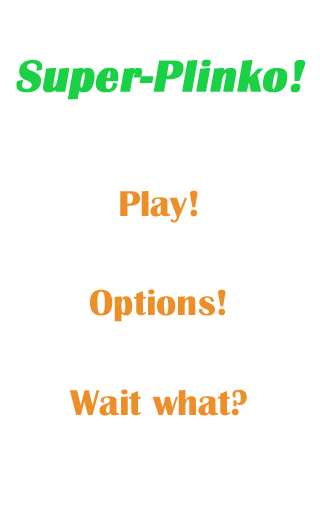
<style>
.page{position:relative;width:320px;height:512px;background:#ffffff}
.page>*{position:absolute;margin:0}
.t1{font:37.4px/99.6px "BritannicBold";color:#ed8f29}
.t2{font:45.7px/124.5px "BritannicBold";color:#1ad044;font-weight:bold;font-style:italic}
.t3{font:37.4px/124.5px "BritannicBold";color:#ed8f29}
</style>
<div class="page">
<p class="t1" style="left:16px;top:59px;width:290px;height:357px;text-align:center"><span class="t2">Super-Plinko!<br></span><span class="t3">Play!<br></span>Options!<br>Wait what?</p>
</div>
